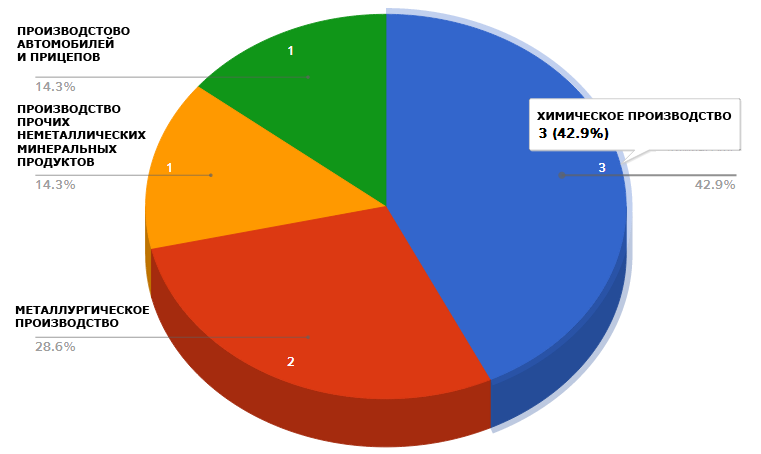
<style>
.page{position:relative;width:761px;height:454px;background:#ffffff}
.page>*{position:absolute;margin:0}
.t1{font:11px "Verdana-Bold";color:#000000}
</style>
<div class="page">
<p class="t1" style="left:17px;top:27px;width:113px;height:36px">ПРОИЗВОДСТОВО<br>АВТОМОБИЛЕЙ <br>И ПРИЦЕПОВ</p>
<p class="t1" style="left:17px;top:105px;width:129px;height:63px">ПРОИЗВОДСТВО<br>ПРОЧИХ<br>НЕМЕТАЛЛИЧЕСКИХ<br>МИНЕРАЛЬНЫХ <br>ПРОДУКТОВ</p>
<p class="t1" style="left:537px;top:112px;width:195px;height:10px">ХИМИЧЕСКОЕ ПРОИЗВОДСТВО</p>
<p class="t1" style="left:15px;top:306px;width:134px;height:23px">МЕТАЛЛУРГИЧЕСКОЕ<br>ПРОИЗВОДСТВО</p>
</div>
